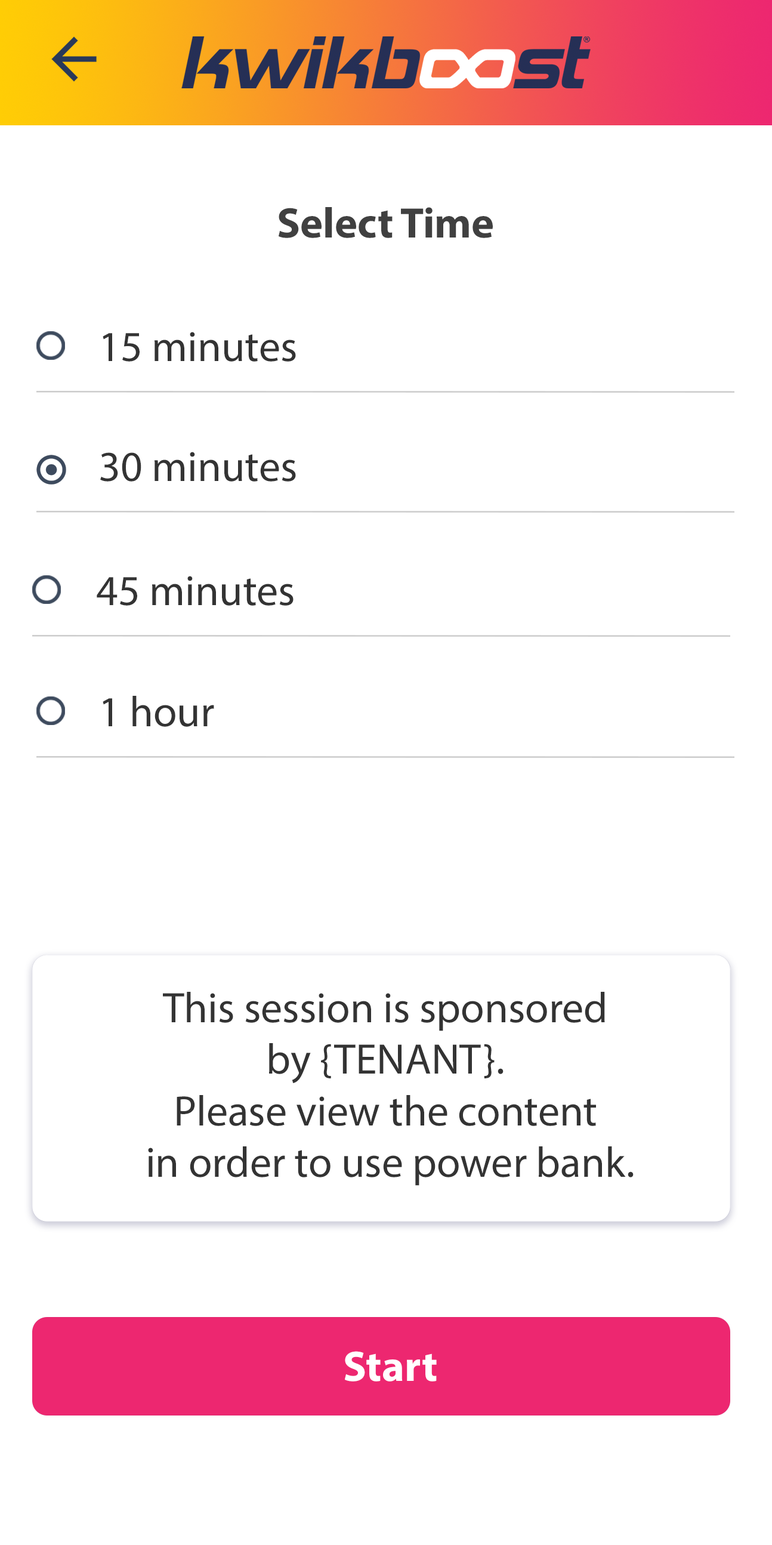
<style>
.page{position:relative;width:772px;height:1545px;background:#ffffff}
.page>*{position:absolute;margin:0}
.t1{font:43px "MyriadPro-Bold";color:#404040}
.t2{font:43px "MyriadPro-Regular";color:#333333}
.t3{font:43px "MyriadPro-Bold";color:#ffffff}
</style>
<div class="page">
<p class="t1" style="left:279px;top:207px;width:214px;height:31px">Select Time</p>
<p class="t2" style="left:103px;top:332px;width:193px;height:30px">15 minutes</p>
<p class="t2" style="left:100px;top:452px;width:196px;height:29px">30 minutes</p>
<p class="t2" style="left:97px;top:576px;width:197px;height:30px">45 minutes</p>
<p class="t2" style="left:103px;top:696px;width:111px;height:31px">1 hour</p>
<p class="t2" style="left:148px;top:992px;width:486px;height:193px;text-align:center">This session is sponsored <br>by {TENANT}. <br>Please view the content <br>in order to use power bank.</p>
<p class="t3" style="left:345px;top:1351px;width:92px;height:30px">Start</p>
</div>
